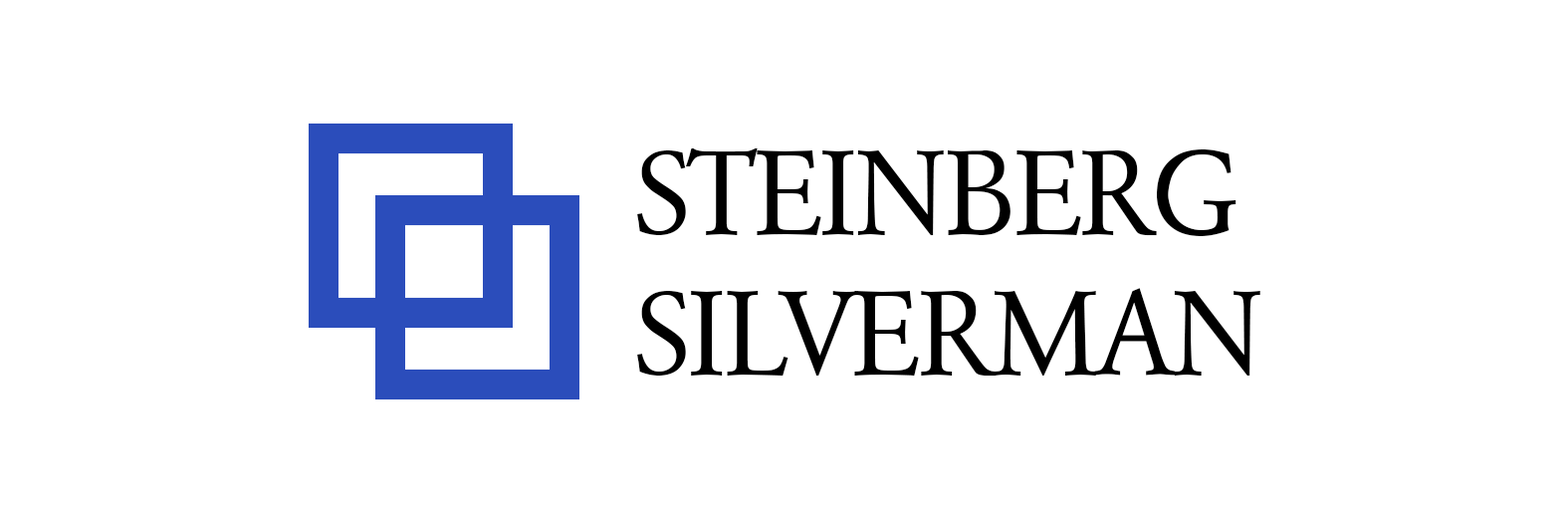
<style>
.page{position:relative;width:1568px;height:523px;background:#ffffff}
.page>*{position:absolute;margin:0}
.t1{font:124.4px/141px "Garamond-Roman";letter-spacing:-0.04em;color:#000000}
</style>
<div class="page">
<p class="t1" style="left:637px;top:148px;width:623px;height:227px">STEINBERG <br>SILVERMAN</p>
</div>
